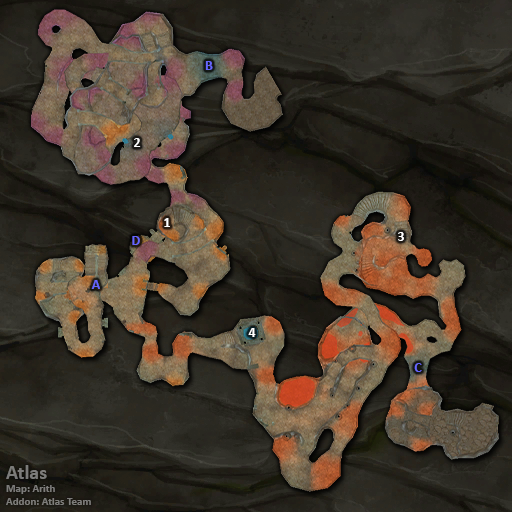
<style>
.page{position:relative;width:512px;height:512px}
.page>*{position:absolute;margin:0}
.t1{font:14px "Calibri-Bold";color:#6666ff}
.t2{font:14px "Calibri-Bold";color:#ffffff}
.t3{font:11px "Calibri-Bold";color:#7d7c7a}
.t4{font:20px "Calibri-Bold";color:#7d7c7a}
</style>
<div class="page">
<p class="t1" style="left:205px;top:61px;width:8px;height:9px">B</p>
<p class="t2" style="left:134px;top:138px;width:7px;height:9px">2</p>
<p class="t2" style="left:164px;top:218px;width:6px;height:9px">1</p>
<p class="t2" style="left:398px;top:232px;width:6px;height:9px">3</p>
<p class="t1" style="left:132px;top:236px;width:8px;height:9px">D</p>
<p class="t1" style="left:91px;top:280px;width:9px;height:9px">A</p>
<p class="t2" style="left:248px;top:328px;width:8px;height:9px">4</p>
<p class="t1" style="left:414px;top:363px;width:8px;height:9px">C</p>
<p class="t3" style="left:6px;top:465px;width:85px;height:40px"><span class="t4">Atlas<br></span>Map: Arith<br>Addon: Atlas Team</p>
</div>
